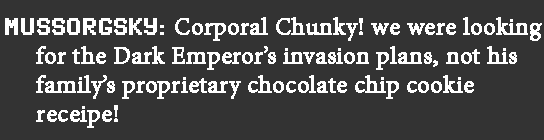
<style>
.page{position:relative;width:544px;height:140px;background:#333333}
.page>*{position:absolute;margin:0}
.t1{font:24px "MinionPro-Regular";color:#ffffff;font-weight:bold}
.t2{font:24px "SynchroLET";color:#ffffff;font-weight:bold}
</style>
<div class="page">
<p class="t1" style="left:5px;top:17px;width:537px;height:111px"><span class="t2">MUSSORGSKY: </span>Corporal Chunky! we were looking<br>     for the Dark Emperor’s invasion plans, not his <br>     family’s proprietary chocolate chip cookie <br>     receipe!</p>
</div>
